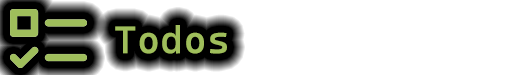
<style>
.page{position:relative;width:512px;height:75px;background:#ffffff}
.page>*{position:absolute;margin:0}
.t1{font:38px "CascadiaMono-Regular";color:#9fbe5b;font-weight:bold}
</style>
<div class="page">
<p class="t1" style="left:115px;top:25px;width:112px;height:29px">Todos</p>
</div>
